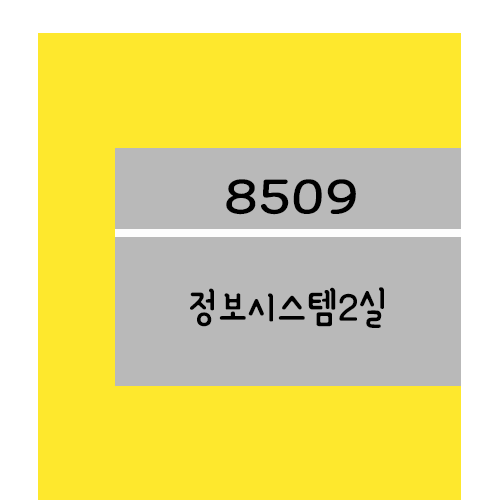
<style>
.page{position:relative;width:500px;height:500px;background:#fee82d}
.page>*{position:absolute;margin:0}
.t1{font:61.2px "YanoljaYacheR";color:#000000;scale:1.18 1}
.t2{font:48px "YanoljaYacheR";color:#000000}
</style>
<div class="page">
<p class="t1" style="left:226px;top:179px;width:130px;height:36px">8509</p>
<p class="t2" style="left:190px;top:287px;width:194px;height:41px">정보시스템2실</p>
</div>
